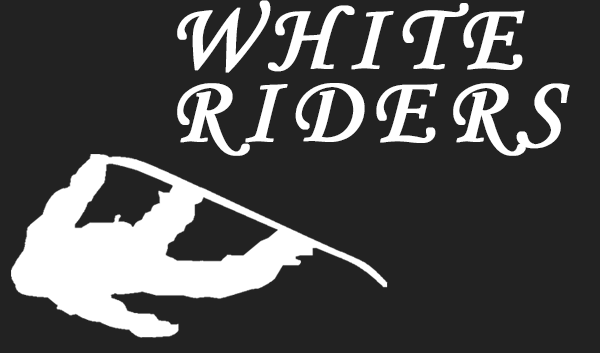
<style>
.page{position:relative;width:600px;height:353px;background:#222222}
.page>*{position:absolute;margin:0}
.t1{font:96.7px/72.6px "MonotypeCorsiva";letter-spacing:0.11em;color:#ffffff;text-transform:uppercase;font-weight:bold}
</style>
<div class="page">
<p class="t1" style="left:177px;top:0px;width:393px;height:156px">white<br>Riders</p>
</div>
